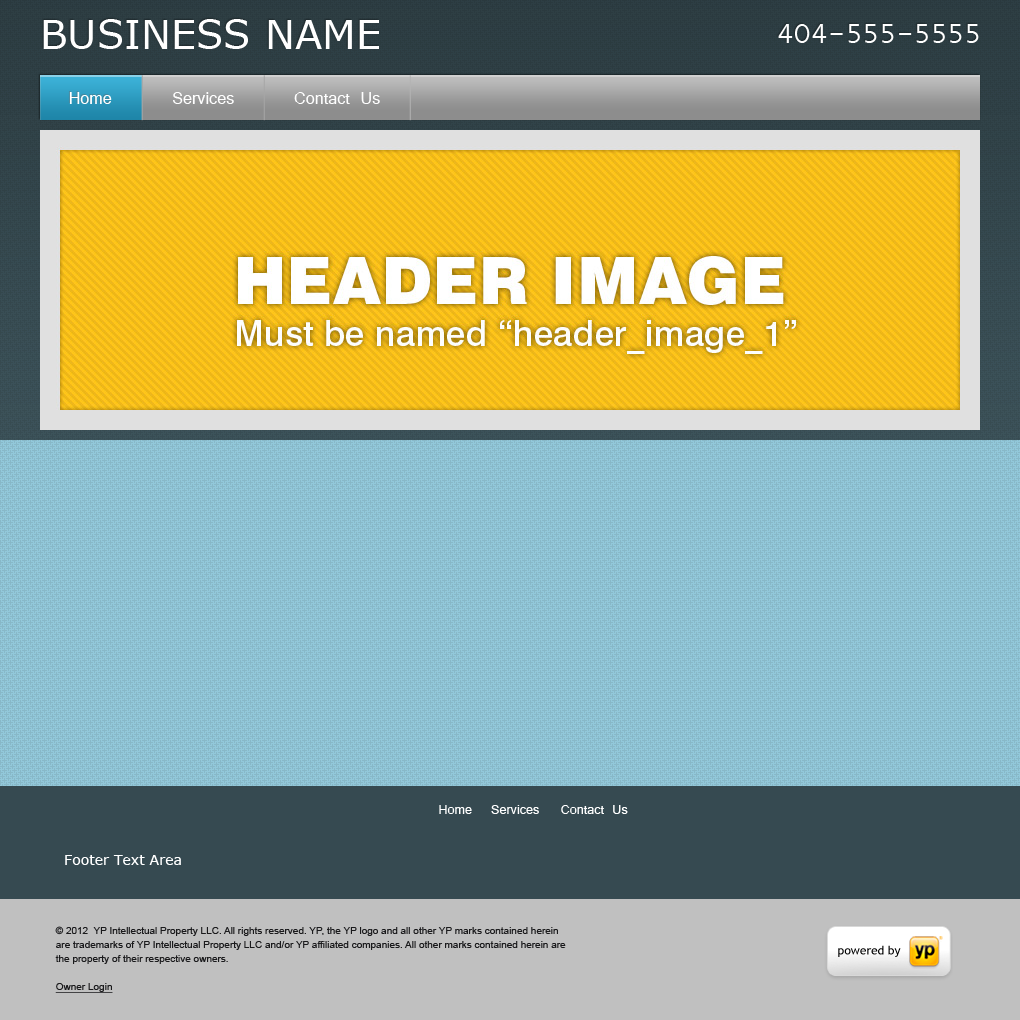
<style>
.page{position:relative;width:1020px;height:1020px;background:#92c8da}
.page>*{position:absolute;margin:0}
.t1{font:40px "Verdana";color:#ffffff;text-transform:uppercase}
.t2{font:30px "Vrinda";color:#ffffff}
.t3{font:18px "Vrinda";color:#ffffff}
.t4{font:14px "Vrinda";color:#ffffff}
.t5{font:14px "Verdana";color:#ffffff}
.t6{font:10px/14px "ArialMT";color:#1a1a1c}
.t7{font:10px/14px "ArialMT";color:#1a1a1c;text-decoration:underline}
</style>
<div class="page">
<p class="t1" style="left:43px;top:19px;width:336px;height:30px">Business Name</p>
<p class="t2" style="left:778px;top:24px;width:201px;height:19px">404-555-5555</p>
<p class="t3" style="left:69px;top:92px;width:43px;height:12px">Home</p>
<p class="t3" style="left:173px;top:92px;width:61px;height:12px">Services</p>
<p class="t3" style="left:294px;top:92px;width:86px;height:12px">Contact Us</p>
<p class="t4" style="left:439px;top:805px;width:33px;height:9px">Home</p>
<p class="t4" style="left:491px;top:805px;width:48px;height:9px">Services</p>
<p class="t4" style="left:561px;top:805px;width:67px;height:9px">Contact Us</p>
<p class="t5" style="left:65px;top:855px;width:116px;height:10px">Footer Text Area</p>
<p class="t6" style="left:55px;top:926px;width:511px;height:67px">© 2012  YP Intellectual Property LLC. All rights reserved. YP, the YP logo and all other YP marks contained herein<br>are trademarks of YP Intellectual Property LLC and/or YP affiliated companies. All other marks contained herein are<br>the property of their respective owners.<br><br><span class="t7">Owner Login</span></p>
</div>
